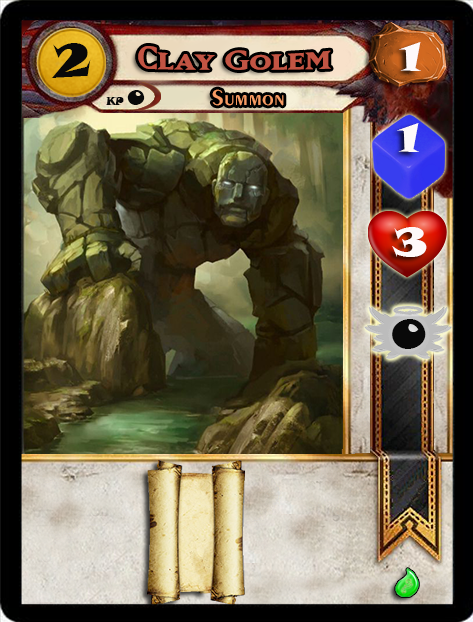
<style>
.page{position:relative;width:473px;height:622px}
.page>*{position:absolute;margin:0}
.t1{font:46.6px "SnapITC-Regular";color:#090909;scale:1.05 1}
.t2{font:40px "MatrixBoldSmallCaps";color:#c25443;scale:1.06 1}
.t3{font:40px "SnapITC-Regular";color:#fef9f9;scale:1.05 1}
.t4{font:22.7px "Exotic350BT-DemiBold";color:#f89c64;scale:1.06 1}
.t5{font:20.5px "SnapITC-Regular";color:#090909}
.t6{font:40px "SnapITC-Regular";color:#090909;scale:1.05 1}
</style>
<div class="page">
<p class="t1" style="left:51px;top:43px;width:40px;height:35px">2</p>
<p class="t2" style="left:138px;top:46px;width:193px;height:24px">Clay Golem</p>
<p class="t3" style="left:399px;top:42px;width:22px;height:29px">1</p>
<p class="t4" style="left:212px;top:89px;width:72px;height:17px">Summon</p>
<p class="t5" style="left:127px;top:90px;width:18px;height:15px">0</p>
<p class="t3" style="left:397px;top:123px;width:22px;height:29px">1</p>
<p class="t3" style="left:392px;top:227px;width:35px;height:30px">3</p>
<p class="t6" style="left:392px;top:319px;width:34px;height:30px">0</p>
</div>
